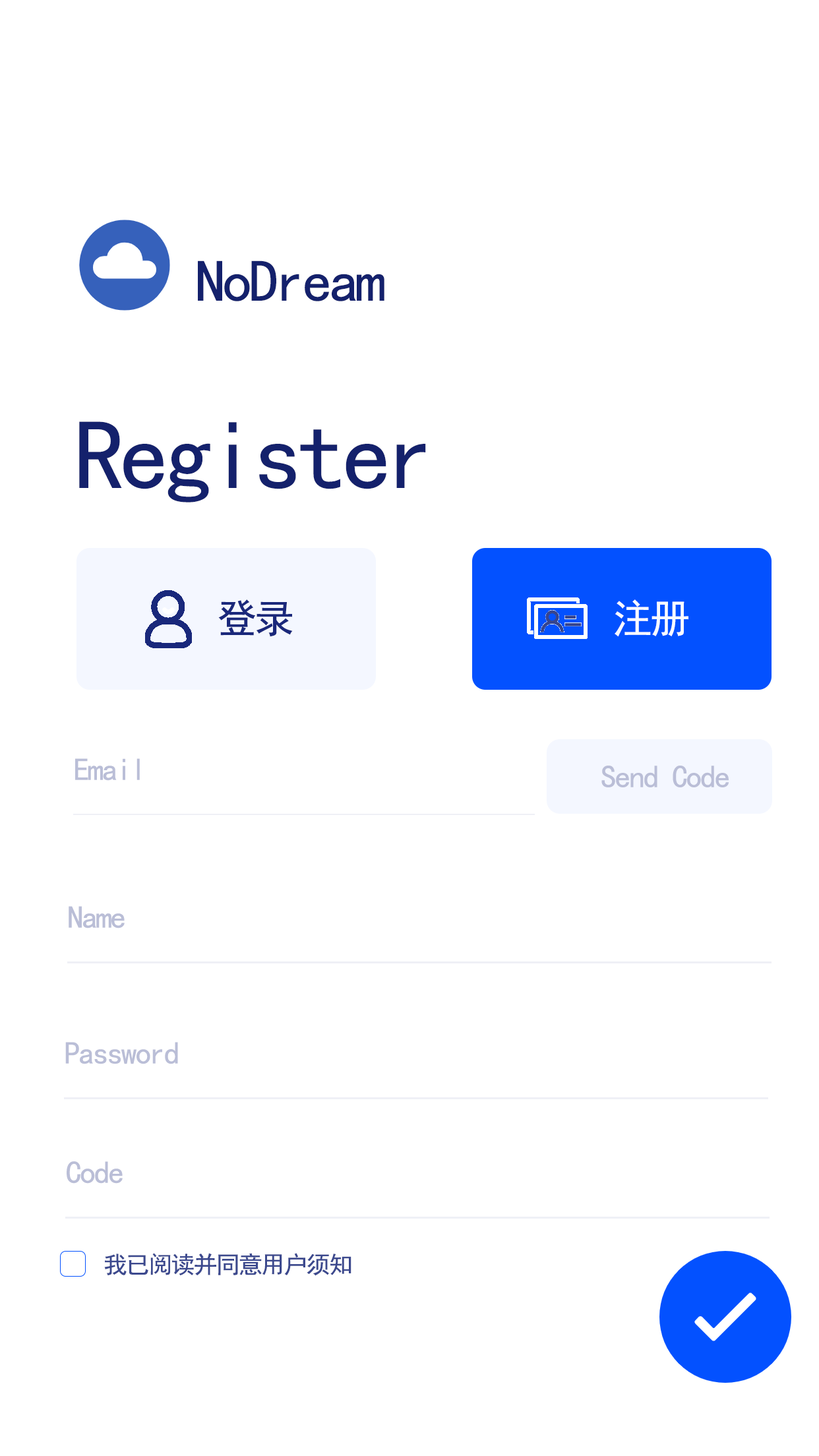
<style>
.page{position:relative;width:819px;height:1456px;background:#ffffff}
.page>*{position:absolute;margin:0}
.t1{font:59.3px "SimHei";letter-spacing:-0.05em;color:#14216c}
.t2{font:98.9px "SimHei";letter-spacing:-0.05em;color:#14216c}
.t3{font:39.6px "SimHei";letter-spacing:-0.05em;color:#1a287b}
.t4{font:39.6px "SimHei";letter-spacing:-0.05em;color:#f9fbff}
.t5{font:31.7px "SimHei";letter-spacing:-0.05em;color:#babed7}
.t6{font:23.7px "SimHei";letter-spacing:-0.05em;color:#3c498e}
</style>
<div class="page">
<p class="t1" style="left:198px;top:260px;width:186px;height:41px">NoDream</p>
<p class="t2" style="left:79px;top:421px;width:347px;height:81px">Register</p>
<p class="t3" style="left:218px;top:599px;width:75px;height:38px">登录</p>
<p class="t4" style="left:615px;top:599px;width:73px;height:38px">注册</p>
<p class="t5" style="left:75px;top:758px;width:65px;height:23px">Email</p>
<p class="t5" style="left:601px;top:766px;width:128px;height:21px">Send Code</p>
<p class="t5" style="left:69px;top:906px;width:56px;height:22px">Name</p>
<p class="t5" style="left:65px;top:1042px;width:113px;height:22px">Password</p>
<p class="t5" style="left:67px;top:1161px;width:56px;height:23px">Code</p>
<p class="t6" style="left:104px;top:1253px;width:247px;height:23px">我已阅读并同意用户须知</p>
</div>
